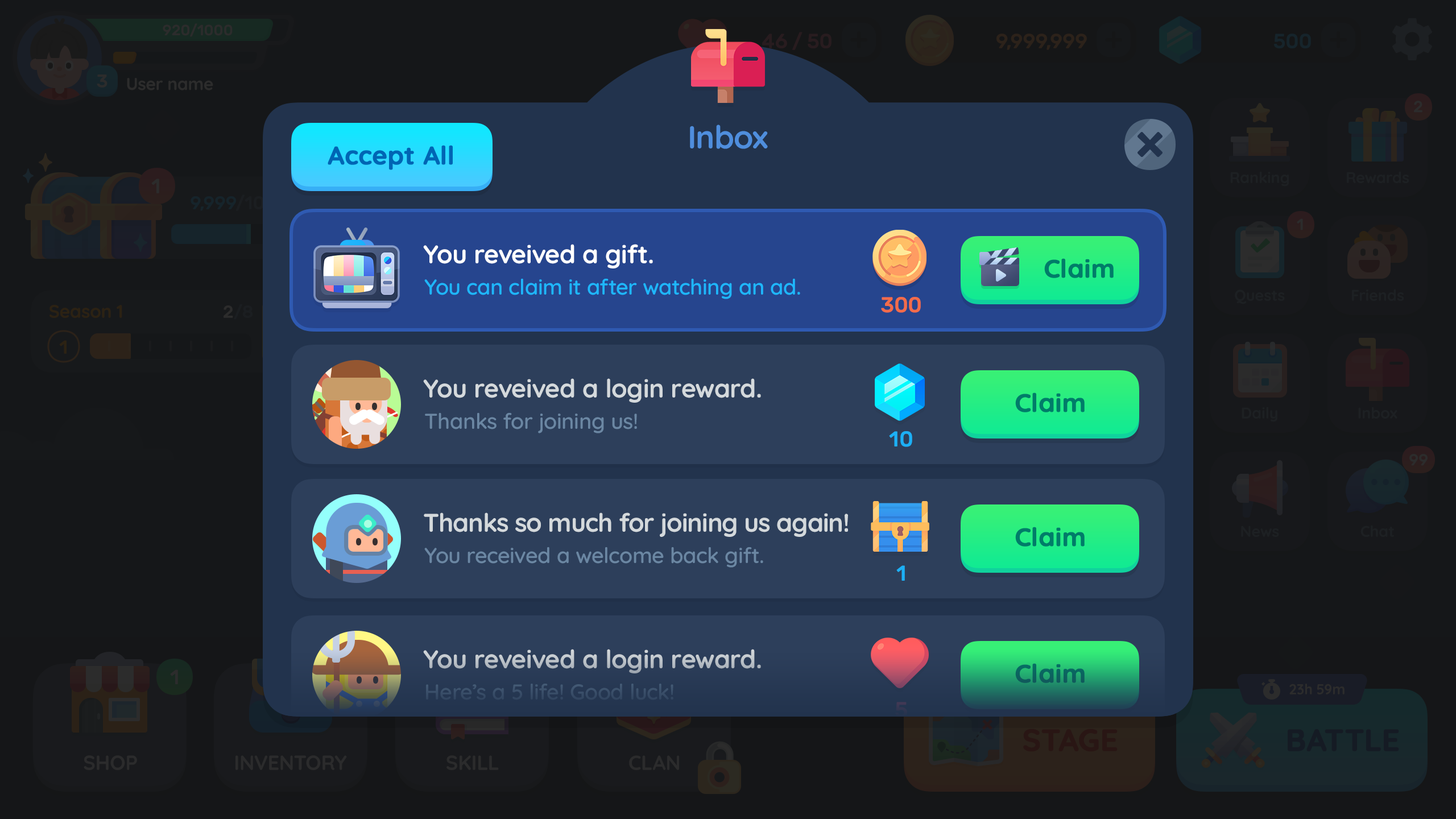
<style>
.page{position:relative;width:1456px;height:819px}
.page>*{position:absolute;margin:0}
.t1{font:31.8px "Quicksand-Bold";letter-spacing:-0.01em;color:#4f8edd}
.t2{font:25.6px "Quicksand-Bold";color:#0065b4;font-weight:bold}
.t3{font:25.6px "Quicksand-Bold";letter-spacing:-0.01em;color:#ffffff}
.t4{font:25.6px "Quicksand-Bold";color:#007c69;font-weight:bold}
.t5{font:21.6px "Quicksand-SemiBold";letter-spacing:-0.01em;color:#1eb7fd}
.t6{font:21.6px "Rubik-Medium";letter-spacing:-0.01em;color:#f36c4a}
.t7{font:25.6px "Quicksand-Bold";letter-spacing:-0.01em;color:#d4d9dc}
.t8{font:21.6px "Quicksand-SemiBold";letter-spacing:-0.01em;color:#6b87a3}
.t9{font:21.6px "Rubik-Medium";letter-spacing:-0.01em;color:#1cb0f6}
.t10{font:25.6px "Quicksand-Bold";letter-spacing:-0.025em;color:#d4d9dc}
.t11{font:25.6px "Quicksand-Bold";letter-spacing:-0.01em;color:#bcc2c8}
.t12{font:25.6px "Quicksand-Bold";color:#0c635f;font-weight:bold}
.t13{font:21.6px "Quicksand-SemiBold";letter-spacing:-0.01em;color:#394e68}
.t14{font:21.6px "Rubik-Medium";letter-spacing:-0.01em;color:#313650}
</style>
<div class="page">
<p class="t1" style="left:690px;top:125px;width:78px;height:24px">Inbox</p>
<p class="t2" style="left:328px;top:145px;width:125px;height:25px">Accept All</p>
<p class="t3" style="left:423px;top:244px;width:230px;height:24px">You reveived a gift.</p>
<p class="t4" style="left:1044px;top:258px;width:70px;height:20px">Claim</p>
<p class="t5" style="left:424px;top:279px;width:376px;height:20px">You can claim it after watching an ad.</p>
<p class="t6" style="left:881px;top:297px;width:40px;height:16px">300</p>
<p class="t7" style="left:423px;top:378px;width:338px;height:25px">You reveived a login reward.</p>
<p class="t4" style="left:1015px;top:392px;width:70px;height:20px">Claim</p>
<p class="t8" style="left:425px;top:413px;width:212px;height:20px">Thanks for joining us!</p>
<p class="t9" style="left:889px;top:431px;width:23px;height:16px">10</p>
<p class="t10" style="left:424px;top:512px;width:424px;height:25px">Thanks so much for joining us again!</p>
<p class="t4" style="left:1015px;top:527px;width:70px;height:20px">Claim</p>
<p class="t8" style="left:424px;top:547px;width:339px;height:21px">You received a welcome back gift.</p>
<p class="t9" style="left:896px;top:565px;width:9px;height:16px">1</p>
<p class="t11" style="left:423px;top:649px;width:338px;height:24px">You reveived a login reward.</p>
<p class="t12" style="left:1015px;top:663px;width:70px;height:20px">Claim</p>
<p class="t13" style="left:426px;top:684px;width:247px;height:16px">Here’s a 5 life! Good luck!</p>
<p class="t14" style="left:895px;top:702px;width:12px;height:16px">5</p>
</div>
